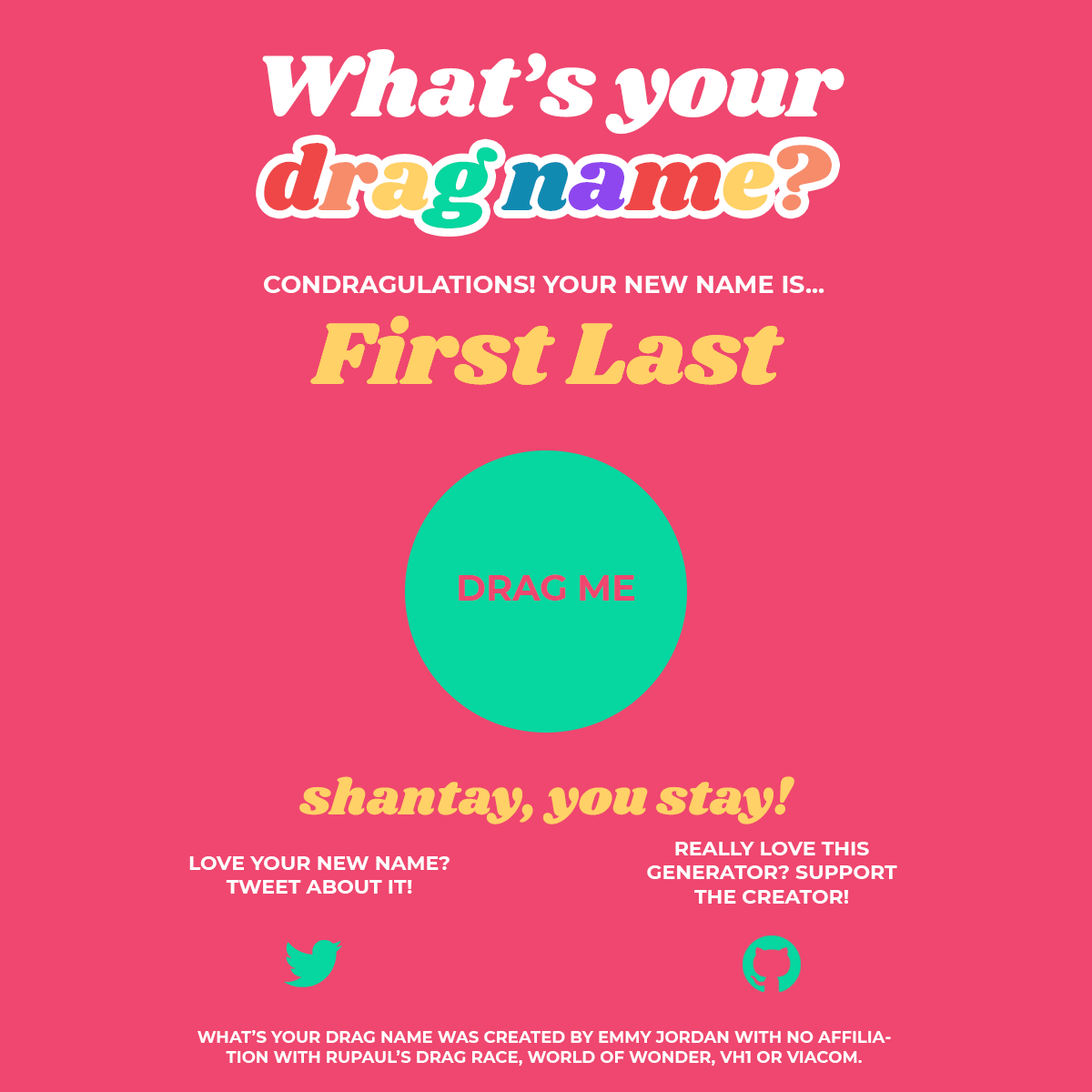
<style>
.page{position:relative;width:1092px;height:1092px;background:#ef476f}
.page>*{position:absolute;margin:0}
.t1{font:91px "Shrikhand-Regular";letter-spacing:-0.01em;color:#ffffff}
.t2{font:91px "Shrikhand-Regular";letter-spacing:-0.01em;color:#ef4747}
.t3{font:91px "Shrikhand-Regular";letter-spacing:-0.01em;color:#f78c6b}
.t4{font:91px "Shrikhand-Regular";letter-spacing:-0.01em;color:#ffd166}
.t5{font:91px "Shrikhand-Regular";letter-spacing:-0.01em;color:#06d6a0}
.t6{font:91px "Shrikhand-Regular";letter-spacing:-0.01em;color:#118ab2}
.t7{font:91px "Shrikhand-Regular";letter-spacing:-0.01em;color:#8e47ef}
.t8{font:24.6px "Montserrat-Bold";color:#ffffff}
.t9{font:91px "Shrikhand-Regular";color:#ffd166}
.t10{font:36.4px "Montserrat-Bold";letter-spacing:-0.01em;color:#ef476f}
.t11{font:51px "Shrikhand-Regular";color:#ffd166}
.t12{font:20px "Montserrat-Bold";color:#ffffff}
.t13{font:16.4px "Montserrat-Bold";color:#ffffff}
</style>
<div class="page">
<p class="t1" style="left:262px;top:49px;width:582px;height:85px">What’s your</p>
<p class="t2" style="left:264px;top:143px;width:568px;height:85px">d<span class="t3">r</span><span class="t4">a</span><span class="t5">g </span><span class="t6">n</span><span class="t7">a</span>m<span class="t4">e</span><span class="t3">?</span></p>
<p class="t8" style="left:264px;top:276px;width:560px;height:17px">CONDRAGULATIONS! YOUR NEW NAME IS...</p>
<p class="t9" style="left:310px;top:316px;width:474px;height:69px">First Last</p>
<p class="t9" style="left:310px;top:316px;width:474px;height:69px">First Last</p>
<p class="t10" style="left:459px;top:574px;width:175px;height:27px">DRAG ME</p>
<p class="t11" style="left:299px;top:776px;width:495px;height:48px">shantay, you stay!</p>
<p class="t12" style="left:647px;top:842px;width:250px;height:62px;text-align:center">REALLY LOVE THIS GENERATOR? SUPPORT THE CREATOR!</p>
<p class="t12" style="left:189px;top:856px;width:261px;height:38px;text-align:center">LOVE YOUR NEW NAME? TWEET ABOUT IT!</p>
<p class="t13" style="left:197px;top:1030px;width:694px;height:36px;text-align:center">WHAT’S YOUR DRAG NAME WAS CREATED BY EMMY JORDAN WITH NO AFFILIATION WITH RUPAUL’S DRAG RACE, WORLD OF WONDER, VH1 OR VIACOM.</p>
</div>
